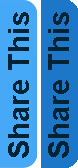
<style>
.page{position:relative;width:78px;height:168px;background:#45a9f7}
.page>*{position:absolute;margin:0}
.t1{font:29px "Arial-BoldMT";color:#002433}
</style>
<div class="page">
<p class="t1" style="left:8px;top:12px;width:21px;height:146px;rotate:-90deg">Share This</p>
<p class="t1" style="left:48px;top:12px;width:21px;height:146px;rotate:-90deg">Share This</p>
</div>
